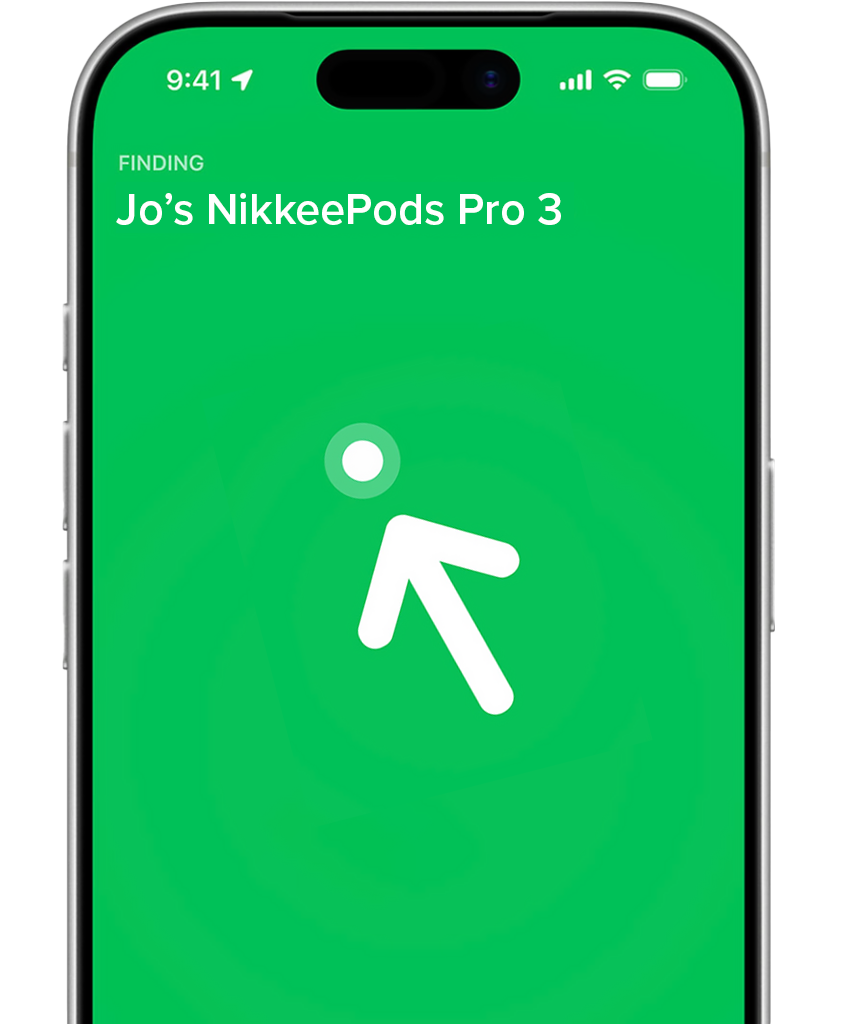
<style>
.page{position:relative;width:854px;height:1024px;background:#00c158}
.page>*{position:absolute;margin:0}
.t1{font:45px "ProximaNova-Semibold";color:#ffffff}
</style>
<div class="page">
<p class="t1" style="left:116px;top:193px;width:445px;height:32px">Jo’s NikkeePods Pro 3</p>
</div>
